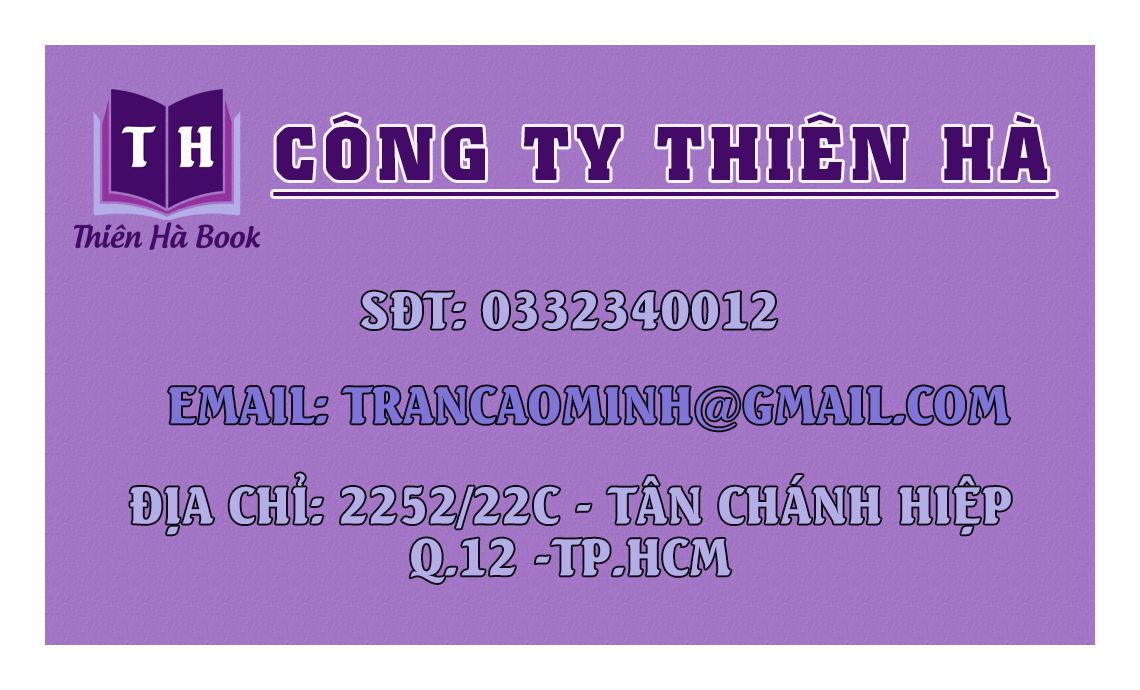
<style>
.page{position:relative;width:1140px;height:690px;background:#ffffff}
.page>*{position:absolute;margin:0}
.t1{font:75px "UTM-Colossalis";letter-spacing:0.1em;color:#440a67;text-decoration:underline}
.t2{font:50px "UTMSeagullBold";color:#b4aee8}
.t3{font:50px "UTMSeagullBold";color:#7f75d8}
.t4{font:50px/51.9px "UTMSeagullBold";color:#b4aee8}
</style>
<div class="page">
<p class="t1" style="left:273px;top:114px;width:783px;height:82px">CÔNG TY THIÊN HÀ</p>
<p class="t2" style="left:361px;top:291px;width:416px;height:38px">SĐT: 0332340012</p>
<p class="t3" style="left:169px;top:386px;width:841px;height:45px">EMAIL: TRANCAOMINH@GMAIL.COM</p>
<p class="t4" style="left:130px;top:473px;width:881px;height:110px;text-align:center">ĐỊA CHỈ: 2252/22C - TÂN CHÁNH HIỆP<br>Q.12 -TP.HCM</p>
</div>
